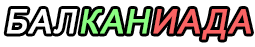
<style>
.page{position:relative;width:255px;height:47px;background:#ffffff}
.page>*{position:absolute;margin:0}
.t1{font:33px "ArialMT";letter-spacing:0.05em;color:#fefefe;font-variant:small-caps;font-weight:bold;font-style:italic}
.t2{font:33px "ArialMT";letter-spacing:0.05em;color:#8afd81;font-variant:small-caps;font-weight:bold;font-style:italic}
.t3{font:33px "ArialMT";letter-spacing:0.05em;color:#fa6363;font-variant:small-caps;font-weight:bold;font-style:italic}
</style>
<div class="page">
<p class="t1" style="left:6px;top:9px;width:72px;height:25px">БАЛ</p>
<p class="t2" style="left:80px;top:9px;width:71px;height:25px">КАН</p>
<p class="t3" style="left:153px;top:9px;width:98px;height:31px">ИАДА</p>
</div>
